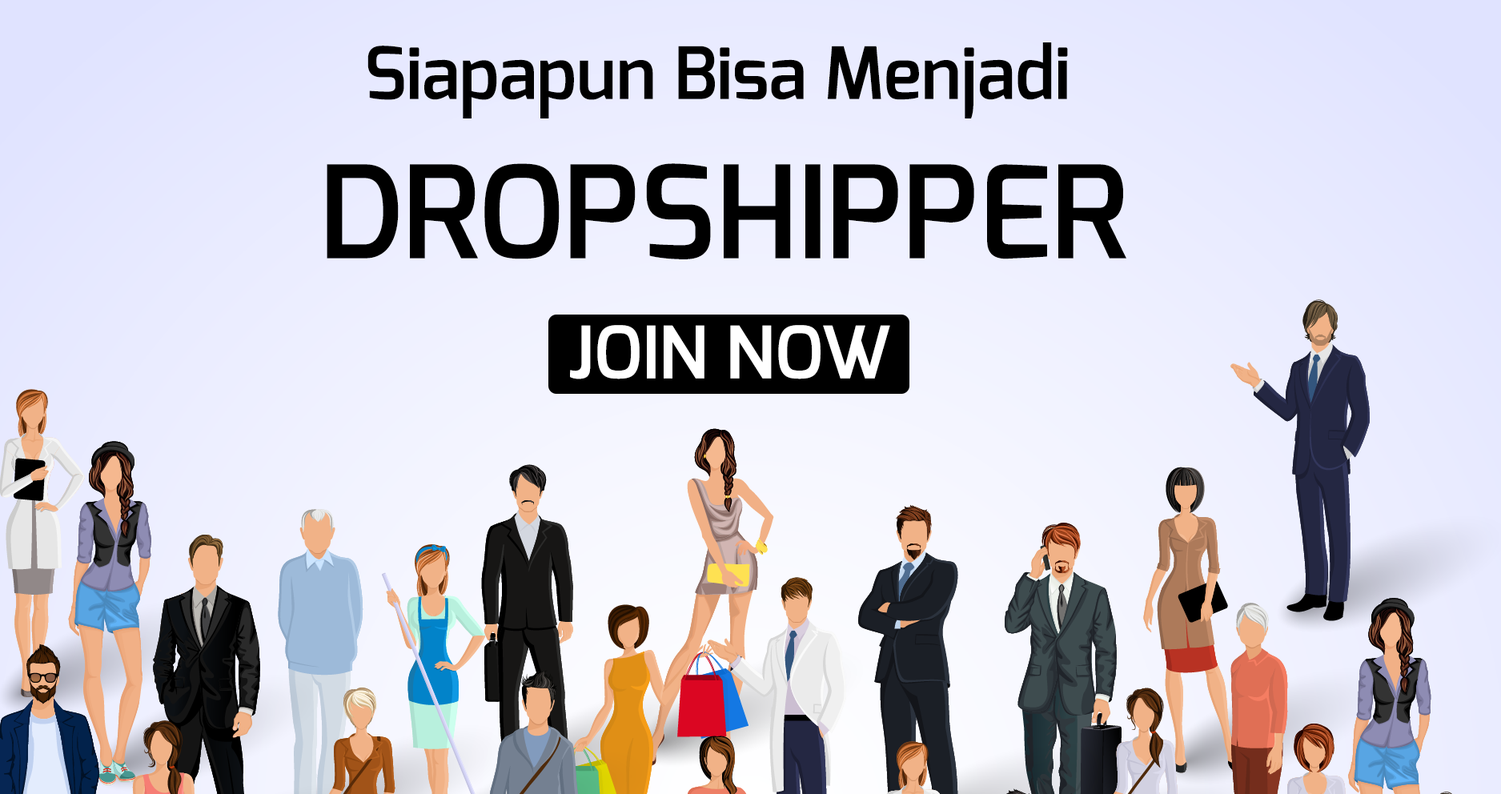
<style>
.page{position:relative;width:1501px;height:794px}
.page>*{position:absolute;margin:0}
.t1{font:72.1px "Exo-DemiBold";color:#000000}
.t2{font:128.1px "Exo-DemiBold";color:#000000}
.t3{font:72.1px "Exo-DemiBold";color:#ffffff}
</style>
<div class="page">
<p class="t1" style="left:368px;top:42px;width:700px;height:77px">Siapapun Bisa Menjadi</p>
<p class="t2" style="left:327px;top:163px;width:800px;height:96px">DROPSHIPPER</p>
<p class="t3" style="left:570px;top:325px;width:320px;height:55px">JOIN NOW</p>
</div>
